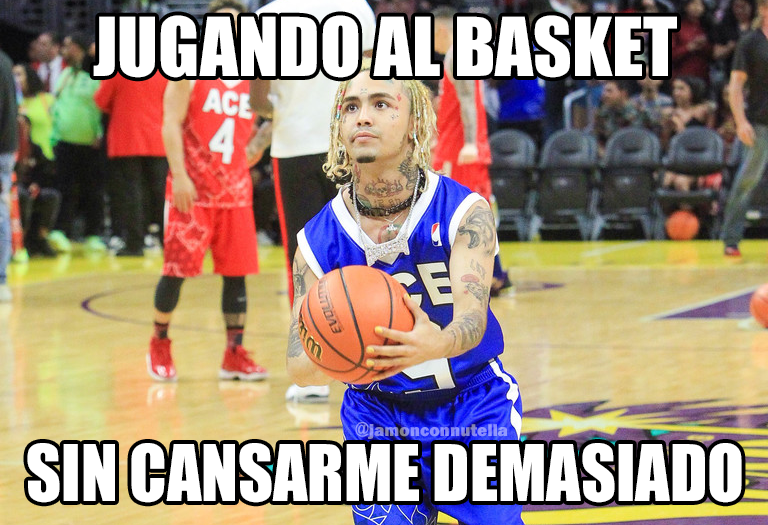
<style>
.page{position:relative;width:768px;height:525px}
.page>*{position:absolute;margin:0}
.t1{font:75px "Impact";color:#ffffff}
.t2{font:17.5px "FranklinGothic-Heavy";color:#888cf8}
.t3{font:17.5px "Impact";color:#888cf8}
.t4{font:72px "Impact";color:#ffffff;scale:0.94 1}
</style>
<div class="page">
<p class="t1" style="left:93px;top:15px;width:584px;height:63px">JUGANDO AL BASKET</p>
<p class="t2" style="left:355px;top:422px;width:153px;height:17px"><span class="t3">@</span>jamonconnutella</p>
<p class="t4" style="left:27px;top:443px;width:715px;height:60px">SIN CANSARME DEMASIADO</p>
</div>
